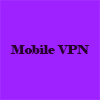
<style>
.page{position:relative;width:100px;height:100px;background:#9e21ff}
.page>*{position:absolute;margin:0}
.t1{font:12.5px "Elephant-Regular";color:#2a002f}
</style>
<div class="page">
<p class="t1" style="left:10px;top:45px;width:80px;height:9px">Mobile VPN</p>
</div>
